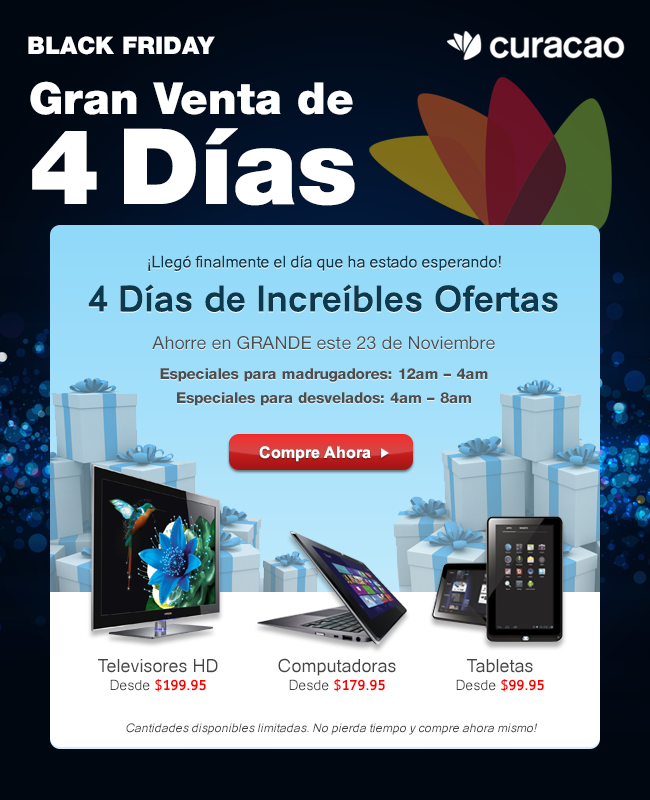
<style>
.page{position:relative;width:650px;height:800px}
.page>*{position:absolute;margin:0}
.t1{font:24px "HelveticaNeue-Black";color:#ffffff}
.t2{font:44px/60px "HelveticaNeue-Black";color:#ffffff}
.t3{font:105px/90px "HelveticaNeue-Black";color:#ffffff}
.t4{font:16px "Catriel";color:#0c394e}
.t5{font:36px "Catriel-Bold";color:#0c394e}
.t6{font:16px "Catriel";color:#000000}
.t7{font:15px/30px "HelveticaNeue-Heavy";color:#4e4e4e}
.t8{font:18px/24px "HelveticaNeue-Roman";color:#4e4e4e}
.t9{font:15px/24px "HelveticaNeue-Heavy";color:#4e4e4e}
.t10{font:16px "Arial-BoldMT";color:#ffffff}
.t11{font:18px/18px "Catriel";color:#444444}
.t12{font:14px/18px "Catriel";color:#444444}
.t13{font:14px/18px "Catriel-Bold";color:#ff0000}
.t14{font:18px/60px "Catriel";color:#444444}
.t15{font:12px "Catriel-Italic";color:#444444}
</style>
<div class="page">
<p class="t1" style="left:28px;top:36px;width:187px;height:19px">BLACK FRIDAY</p>
<p class="t2" style="left:30px;top:81px;width:325px;height:125px">Gran Venta de<br><span class="t3">4 Días</span></p>
<p class="t4" style="left:148px;top:255px;width:353px;height:16px">¡Llegó finalmente el día que ha estado esperando!</p>
<p class="t5" style="left:88px;top:284px;width:470px;height:28px"><span class="t6"><br></span>4 Días de Increíbles Ofertas</p>
<p class="t7" style="left:152px;top:336px;width:343px;height:70px;text-align:center"><span class="t8">Ahorre en GRANDE este 23 de Noviembre<br></span>Especiales para madrugadores: 12am – 4am<br><span class="t9">Especiales para desvelados: 4am – 8am</span></p>
<p class="t10" style="left:259px;top:446px;width:112px;height:16px">Compre Ahora</p>
<p class="t11" style="left:98px;top:659px;width:120px;height:33px;text-align:center">Televisores HD<br><span class="t12">Desde </span><span class="t13">$199.95</span></p>
<p class="t14" style="left:278px;top:658px;width:118px;height:34px;text-align:center">Computadoras<br><span class="t12">Desde </span><span class="t13">$179.95</span></p>
<p class="t14" style="left:456px;top:659px;width:88px;height:33px;text-align:center">Tabletas<br><span class="t12">Desde </span><span class="t13">$99.95</span></p>
<p class="t15" style="left:126px;top:723px;width:412px;height:12px">Cantidades disponibles limitadas. No pierda tiempo y compre ahora mismo!</p>
</div>
